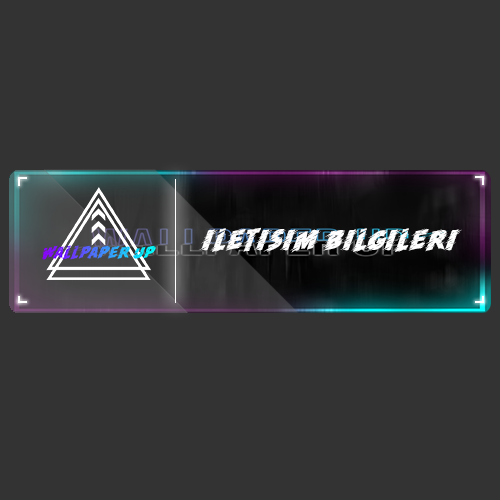
<style>
.page{position:relative;width:500px;height:500px;background:#333333}
.page>*{position:absolute;margin:0}
.t1{font:20.8px "Run!";letter-spacing:0.02em;color:#fefefe}
</style>
<div class="page">
<p class="t1" style="left:199px;top:227px;width:263px;height:26px">iletisim bilgileri</p>
</div>
